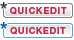
<style>
.page{position:relative;width:74px;height:40px;background:#ffffff}
.page>*{position:absolute;margin:0}
.t1{font:9px "HelveticaNeueLTStd-Bd";letter-spacing:0.075em;color:#bc2a4d;text-transform:uppercase}
</style>
<div class="page">
<p class="t1" style="left:10px;top:7px;width:57px;height:8px">QUICKEDIT</p>
<p class="t1" style="left:10px;top:27px;width:56px;height:8px">QUICKEDIT</p>
</div>
